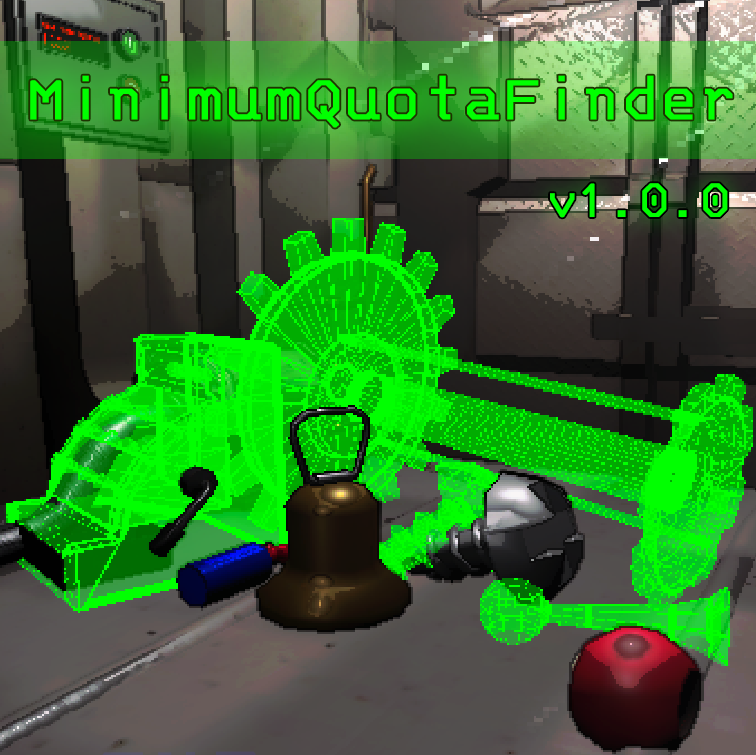
<style>
.page{position:relative;width:756px;height:755px}
.page>*{position:absolute;margin:0}
.t1{font:70px "3270-Regular";color:#01ff01;font-weight:bold}
.t2{font:54px "3270-Regular";color:#01ff01;font-weight:bold}
</style>
<div class="page">
<p class="t1" style="left:30px;top:75px;width:703px;height:53px">MinimumQuotaFinder</p>
<p class="t2" style="left:550px;top:183px;width:178px;height:35px">v1.0.0</p>
</div>
